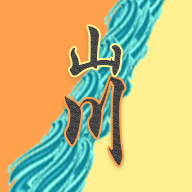
<style>
.page{position:relative;width:192px;height:192px;background:#fff192}
.page>*{position:absolute;margin:0}
.t1{font:68.8px "STXingkai";color:#474747}
.t2{font:100.9px "STXingkai";color:#464646}
</style>
<div class="page">
<p class="t1" style="left:69px;top:26px;width:53px;height:50px">山</p>
<p class="t2" style="left:64px;top:76px;width:61px;height:90px">川</p>
</div>
